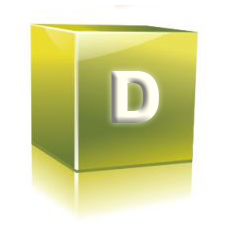
<style>
.page{position:relative;width:230px;height:230px;background:#ffffff}
.page>*{position:absolute;margin:0}
.t1{font:72px "Arial-Black";color:#fffeee}
</style>
<div class="page">
<p class="t1" style="left:111px;top:71px;width:48px;height:52px">D</p>
</div>
